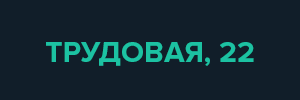
<style>
.page{position:relative;width:300px;height:100px;background:#111e29}
.page>*{position:absolute;margin:0}
.t1{font:30px "ProximaNova-Bold";color:#1cc2a2}
</style>
<div class="page">
<p class="t1" style="left:46px;top:42px;width:208px;height:24px">ТРУДОВАЯ, 22</p>
</div>
